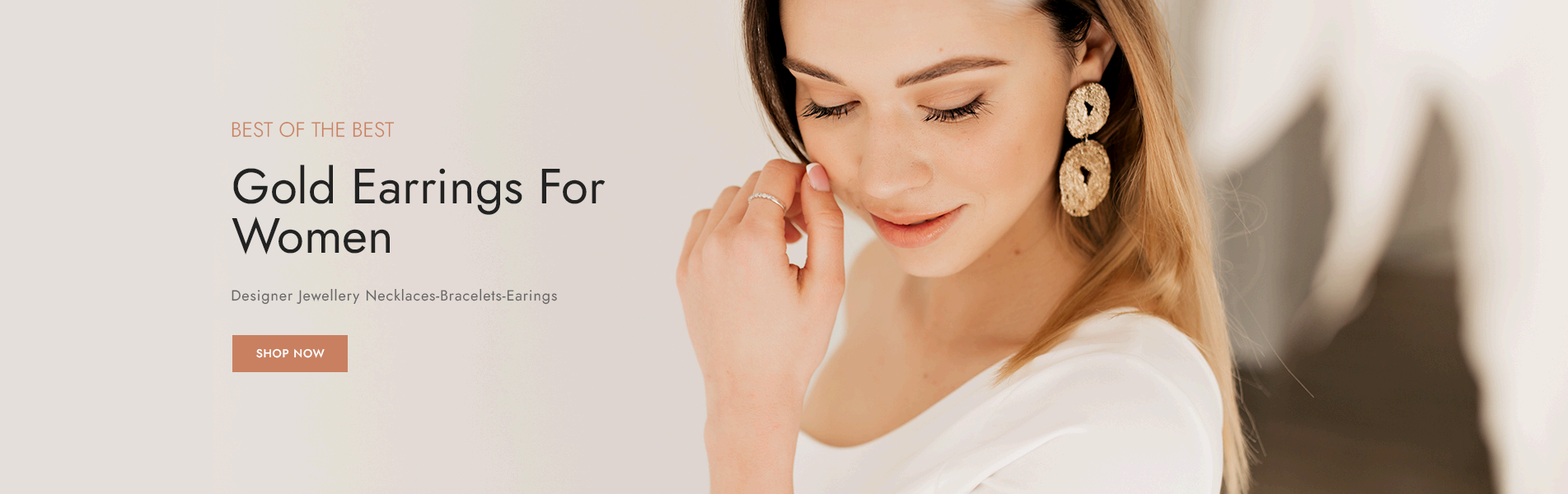
<style>
.page{position:relative;width:1568px;height:494px}
.page>*{position:absolute;margin:0}
.t1{font:20.6px "Jost-Light";color:#c98060;text-transform:uppercase}
.t2{font:49.4px/49.4px "Jost-Regular";color:#222222}
.t3{font:14.8px "Jost-Regular";letter-spacing:0.05em;color:#666666}
.t4{font:11.5px "Jost-Medium";letter-spacing:0.05em;color:#ffffff;text-transform:uppercase}
</style>
<div class="page">
<p class="t1" style="left:232px;top:122px;width:163px;height:16px">best of the best</p>
<p class="t2" style="left:232px;top:165px;width:374px;height:90px">Gold Earrings For <br>Women</p>
<p class="t3" style="left:232px;top:288px;width:325px;height:17px">Designer Jewellery Necklaces-Bracelets-Earings</p>
<p class="t4" style="left:256px;top:349px;width:69px;height:9px">Shop Now</p>
</div>
